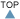
<style>
.page{position:relative;width:20px;height:19px;background:#ffffff}
.page>*{position:absolute;margin:0}
.t1{font:9px "ArialMT"}
</style>
<div class="page">
<p class="t1" style="left:0px;top:1px;width:19px;height:7px">TOP</p>
</div>
